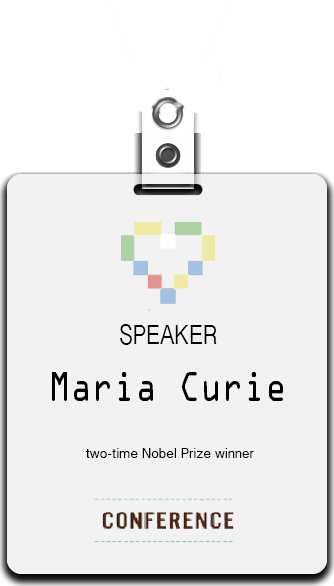
<style>
.page{position:relative;width:334px;height:586px;background:#f2f2f2}
.page>*{position:absolute;margin:0}
.t1{font:28.4px "BanglaSangamMN";color:#000000;scale:0.83 1}
.t2{font:37.3px "OCRAStd";color:#000000;scale:0.81 1}
.t3{font:14px "BanglaSangamMN";color:#000000}
</style>
<div class="page">
<p class="t1" style="left:120px;top:324px;width:97px;height:21px">SPEAKER</p>
<p class="t2" style="left:52px;top:372px;width:231px;height:29px">Maria Curie</p>
<p class="t3" style="left:86px;top:448px;width:168px;height:10px">two-time Nobel Prize winner</p>
</div>
